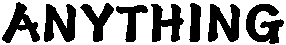
<style>
.page{position:relative;width:286px;height:45px;background:#ffffff}
.page>*{position:absolute;margin:0}
.t1{font:48px "Yj-BACDOO-Bold";color:#000000}
</style>
<div class="page">
<p class="t1" style="left:2px;top:2px;width:282px;height:42px">ANYTHING</p>
</div>
